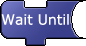
<style>
.page{position:relative;width:86px;height:46px;background:#ffffff}
.page>*{position:absolute;margin:0}
.t1{font:14px "Verdana";color:#ffffff}
</style>
<div class="page">
<p class="t1" style="left:1px;top:14px;width:68px;height:11px">Wait Until</p>
</div>
